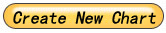
<style>
.page{position:relative;width:166px;height:33px}
.page>*{position:absolute;margin:0}
.t1{font:18px "SimHei";color:#050505;font-style:italic}
</style>
<div class="page">
<p class="t1" style="left:13px;top:11px;width:143px;height:13px">Create New Chart</p>
</div>
